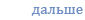
<style>
.page{position:relative;width:85px;height:20px;background:#ffffff}
.page>*{position:absolute;margin:0}
.t1{font:15px "Cambria";color:#718ec3}
</style>
<div class="page">
<p class="t1" style="left:31px;top:7px;width:52px;height:9px">дальше</p>
</div>
